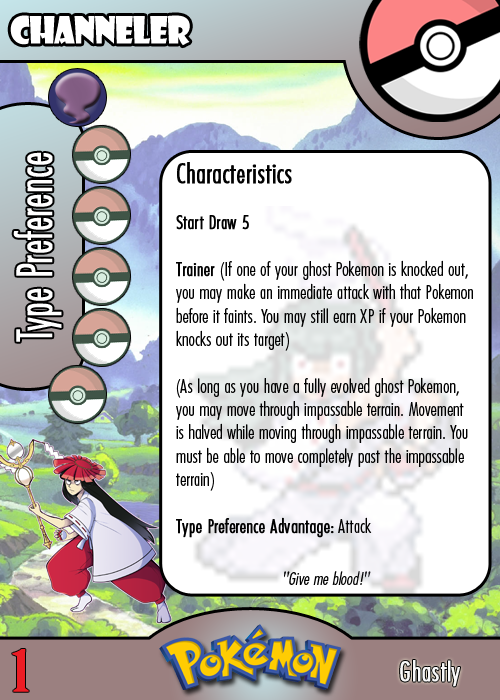
<style>
.page{position:relative;width:500px;height:700px;background:#ffffff}
.page>*{position:absolute;margin:0}
.t1{font:36.7px "ShowcardGothic-Reg";letter-spacing:-0.025em;color:#ffffff;scale:0.91 1}
.t2{font:46.7px "Futura-CondensedLight";color:#ffffff;font-weight:bold;scale:0.83 1}
.t3{font:19.4px "FuturaCondensedBQ-Light";color:#010101}
.t4{font:27.8px "FuturaCondensedBQ-Light";color:#010101;font-weight:bold}
.t5{font:19.4px "FuturaCondensedBQ-Light";color:#010101;font-weight:bold}
.t6{font:18.1px "FuturaCondensedBQ-Light";color:#010101;font-style:italic}
.t7{font:55.6px "BirchStd";color:#ed1c24;font-weight:bold;scale:1.5 1}
.t8{font:27.8px "FuturaCondensedBQ-Light";color:#f9f9f9;font-weight:bold}
</style>
<div class="page">
<p class="t1" style="left:10px;top:15px;width:180px;height:31px">Channeler</p>
<p class="t2" style="left:13px;top:152px;width:49px;height:190px;rotate:-90deg">Type Preference</p>
<p class="t3" style="left:176px;top:162px;width:297px;height:376px"><span class="t4">Characteristics<br></span><span class="t5"><br>Start Draw 5<br><br>Trainer </span>(If one of your ghost Pokemon is knocked out, you may make an immediate attack with that Pokemon before it faints. You may still earn XP if your Pokemon knocks out its target)<br><br>(As long as you have a fully evolved ghost Pokemon, you may move through impassable terrain. Movement is halved while moving through impassable terrain. You must be able to move completely past the impassable terrain)<br><br><span class="t5">Type Preference Advantage:</span> Attack</p>
<p class="t6" style="left:284px;top:571px;width:87px;height:14px">"Give me blood!"</p>
<p class="t7" style="left:12px;top:649px;width:17px;height:43px">1</p>
<p class="t8" style="left:400px;top:660px;width:60px;height:27px">Ghastly</p>
</div>
